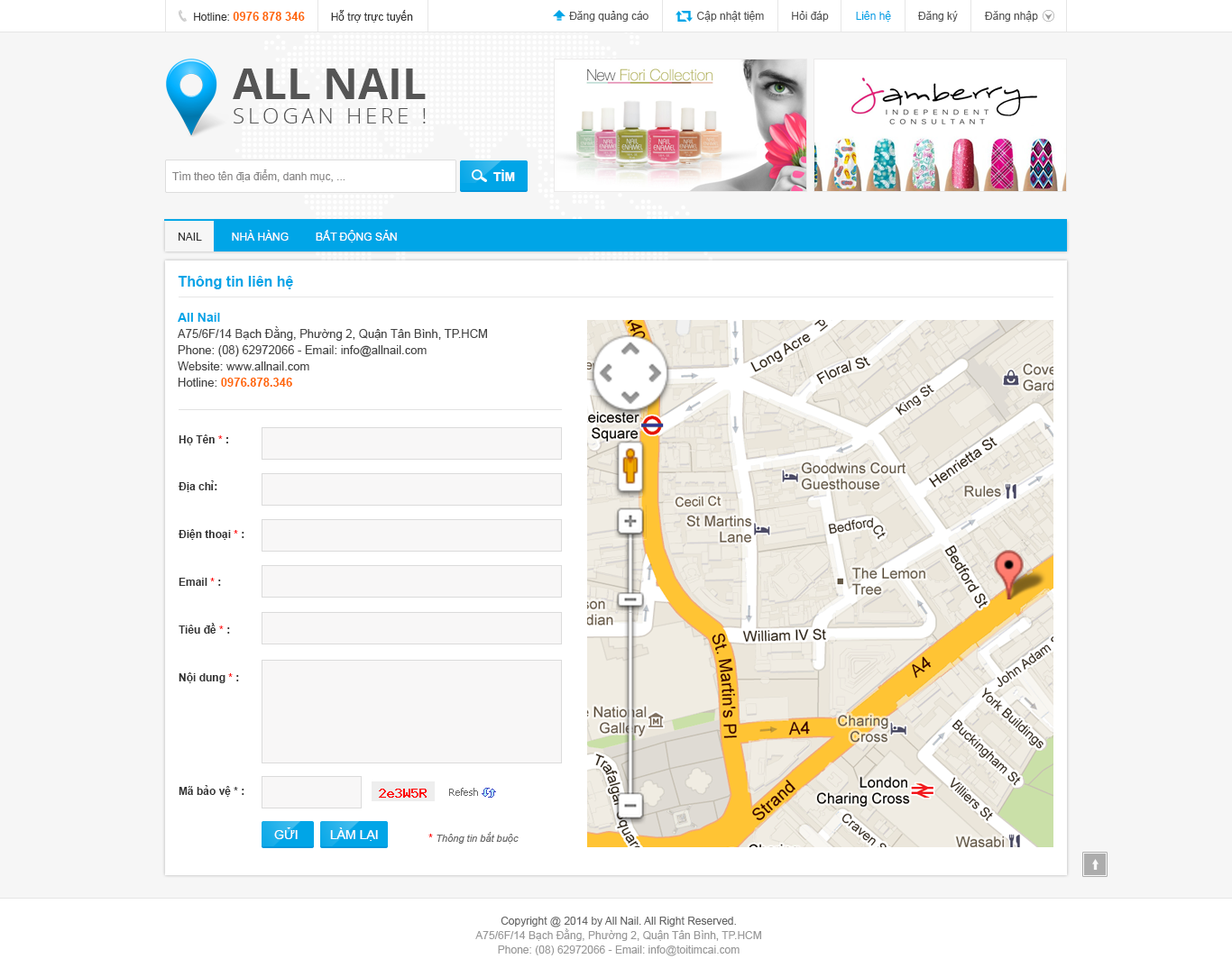
<style>
.page{position:relative;width:1232px;height:968px;background:#ffffff}
.page>*{position:absolute;margin:0}
.t1{font:10.8px "ArialMT";color:#333333}
.t2{font:11.7px "Arial-BoldMT";color:#ff6600;text-transform:uppercase}
.t3{font:10.8px "ArialMT";color:#555555}
.t4{font:10.8px "ArialMT";color:#00a5e7}
.t5{font:43.3px "OpenSans-Bold";color:#555555;text-transform:uppercase}
.t6{font:21.6px "OpenSans-Light";letter-spacing:0.16em;color:#555555;text-transform:uppercase}
.t7{font:10.8px "ArialMT";color:#898888}
.t8{font:12.6px "Arial-BoldMT";color:#ffffff}
.t9{font:10.8px "ArialMT";color:#ffffff;text-transform:uppercase}
.t10{font:10.8px "ArialMT";color:#333333;text-transform:uppercase}
.t11{font:14.4px "Arial-BoldMT";color:#00a5e7}
.t12{font:11.7px/16.2px "ArialMT";color:#444444}
.t13{font:12.6px/16.2px "Arial-BoldMT";color:#00a5e7}
.t14{font:11.7px/16.2px "Arial-BoldMT";color:#ff6600}
.t15{font:10.8px/25.2px "Arial-BoldMT";color:#333333}
.t16{font:10.8px/25.2px "Arial-BoldMT";color:#ff0000}
.t17{font:9.9px "Tahoma";color:#666666}
.t18{font:12.6px "ArialMT";color:#ffffff;text-transform:uppercase}
.t19{font:9.9px "Arial-ItalicMT";color:#666666}
.t20{font:10.8px "Arial-BoldMT";color:#ff0000}
.t21{font:10.8px/14.4px "ArialMT";color:#999999}
.t22{font:10.8px/14.4px "ArialMT";color:#666666}
</style>
<div class="page">
<p class="t1" style="left:194px;top:10px;width:219px;height:13px">Hotline: <span class="t2">0976 878 346        </span>Hỗ trợ trực tuyến</p>
<p class="t3" style="left:569px;top:11px;width:469px;height:11px">Đăng quảng cáo                Cập nhật tiệm         Hỏi đáp       <span class="t4">  Liên hệ </span>        Đăng ký         Đăng nhập</p>
<p class="t5" style="left:233px;top:69px;width:193px;height:30px">all nail</p>
<p class="t6" style="left:234px;top:108px;width:192px;height:16px">Slogan here !</p>
<p class="t7" style="left:172px;top:169px;width:173px;height:13px">Tìm theo tên địa điểm, danh mục, ...</p>
<p class="t8" style="left:493px;top:169px;width:22px;height:12px">TÌM</p>
<p class="t9" style="left:179px;top:230px;width:218px;height:13px"><span class="t10">nail         </span> nhà hàng         Bất động sản</p>
<p class="t11" style="left:178px;top:276px;width:115px;height:13px">Thông tin liên hệ</p>
<p class="t12" style="left:178px;top:313px;width:309px;height:74px"><span class="t13">All Nail<br></span>A75/6F/14 Bạch Đằng, Phường 2, Quận Tân Bình, TP.HCM<br>Phone: (08) 62972066 - Email: info@allnail.com<br>Website: www.allnail.com<br>Hotline: <span class="t14">0976.878.346</span></p>
<p class="t15" style="left:179px;top:435px;width:65px;height:362px">Họ Tên<span class="t16"> * </span>:<br>Địa chỉ:<br>Điện thoại<span class="t16"> * </span>:<br>Email<span class="t16"> * </span>:<br>Tiêu đề<span class="t16"> * </span>:<br>Nội dung<span class="t16"> * </span>:<br><br>Mã bảo vệ * :</p>
<p class="t17" style="left:449px;top:788px;width:29px;height:8px">Refesh</p>
<p class="t18" style="left:274px;top:828px;width:24px;height:11px">gửi</p>
<p class="t18" style="left:330px;top:828px;width:48px;height:13px">làm lại</p>
<p class="t19" style="left:428px;top:832px;width:90px;height:12px"><span class="t20"> * </span>Thông tin bắt buộc</p>
<p class="t21" style="left:475px;top:917px;width:286px;height:40px;text-align:center"><span class="t22">Copyright @ 2014 by All Nail. All Right Reserved.<br></span>A75/6F/14 Bạch Đằng, Phường 2, Quận Tân Bình, TP.HCM<br>Phone: (08) 62972066 - Email: info@toitimcai.com</p>
</div>
